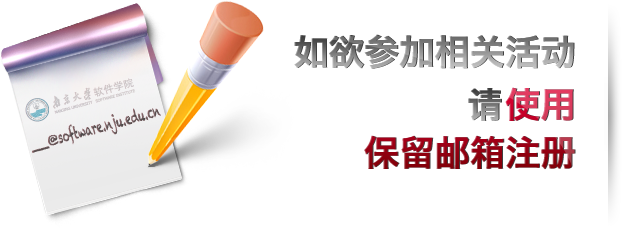
<style>
.page{position:relative;width:622px;height:228px;background:#ffffff}
.page>*{position:absolute;margin:0}
.t1{font:35.3px "HiraginoSansGB-W6"}
.t2{font:35.3px/48px "HiraginoSansGB-W6"}
.t3{font:35.3px/35.3px "PTSans-NarrowBold"}
.t4{font:15.8px "Chalkduster";color:#6b585a;scale:0.59 1}
.t5{font:13px "Chalkduster";color:#6b585a}
</style>
<div class="page">
<p class="t1" style="left:294px;top:34px;width:280px;height:35px">如欲参加相关活动</p>
<p class="t2" style="left:364px;top:87px;width:211px;height:83px;text-align:right"><span class="t3"> </span>使用<br>保留邮箱注册</p>
<p class="t1" style="left:468px;top:88px;width:33px;height:33px">请</p>
<p class="t4" style="left:32px;top:108px;width:129px;height:45px;rotate:-15deg"><span class="t5">__@</span>software.nju.edu.cn</p>
</div>
